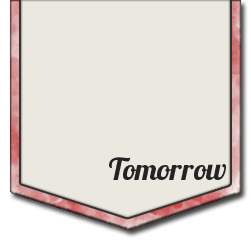
<style>
.page{position:relative;width:251px;height:242px;background:#ebe8df}
.page>*{position:absolute;margin:0}
.t1{font:30px "Lobster1.3";color:#232323}
</style>
<div class="page">
<p class="t1" style="left:109px;top:157px;width:117px;height:23px">Tomorrow</p>
</div>
